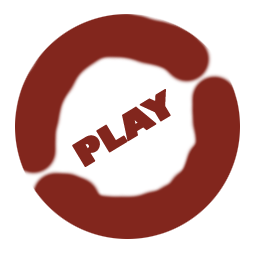
<style>
.page{position:relative;width:256px;height:256px;background:#ffffff}
.page>*{position:absolute;margin:0}
.t1{font:33px "GillSans-UltraBold";color:#82261d;font-weight:bold}
</style>
<div class="page">
<p class="t1" style="left:72px;top:89px;width:99px;height:78px;rotate:-31deg">PLAY</p>
</div>
